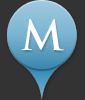
<style>
.page{position:relative;width:85px;height:100px;background:#333333}
.page>*{position:absolute;margin:0}
.t1{font:40.6px "TrajanPro-Bold";color:#ffffff}
</style>
<div class="page">
<p class="t1" style="left:21px;top:18px;width:43px;height:33px">M</p>
</div>
